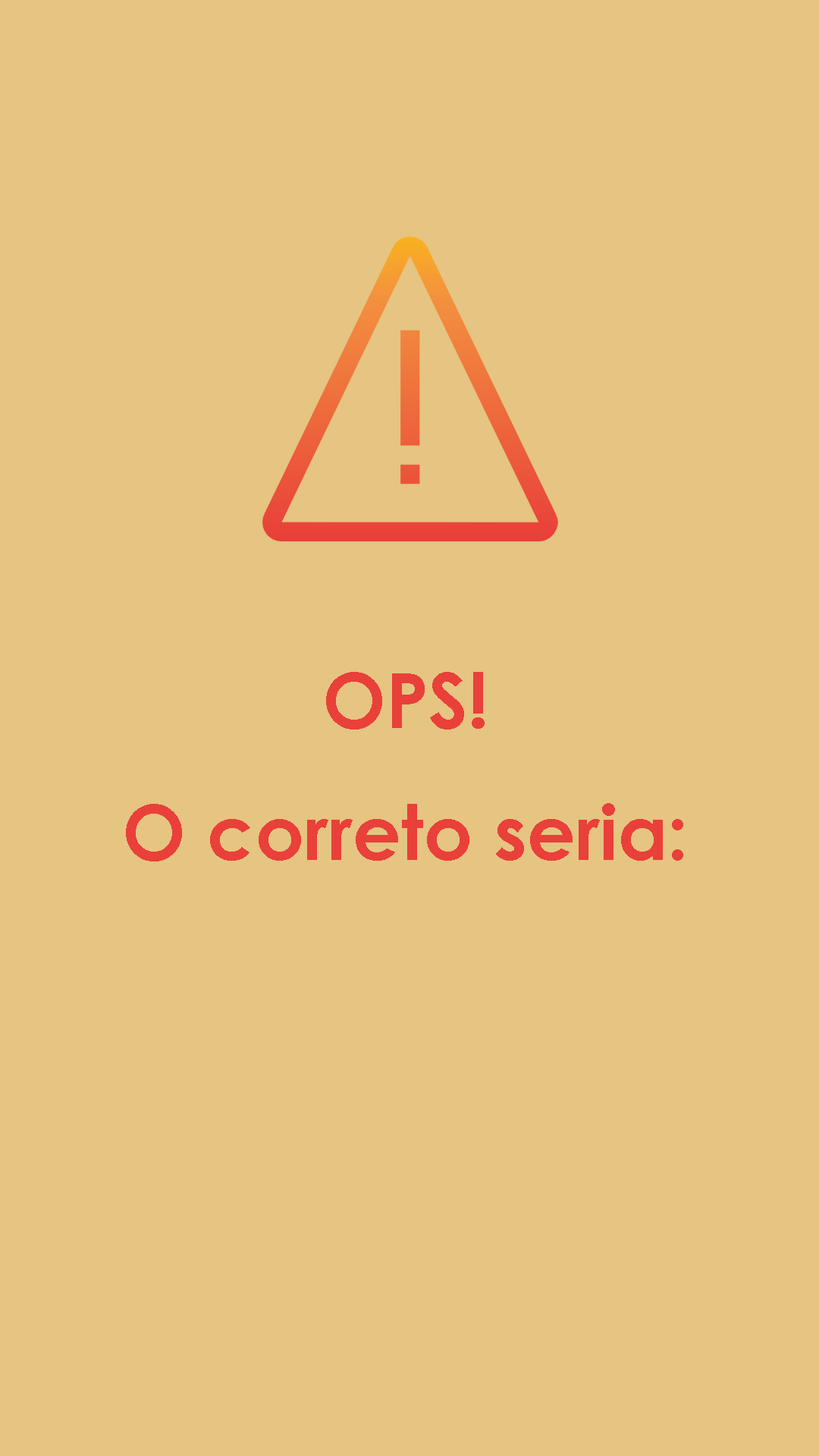
<style>
.page{position:relative;width:819px;height:1456px;background:#e6c481}
.page>*{position:absolute;margin:0}
.t1{font:75.8px/4.5px "CenturyGothic-Bold";color:#e9403a}
</style>
<div class="page">
<p class="t1" style="left:126px;top:672px;width:557px;height:189px;text-align:center">OPS!<br><br><br><br><br><br><br><br><br><br><br><br><br><br><br><br><br><br><br><br><br><br><br><br><br><br><br><br><br>O correto seria:</p>
</div>
